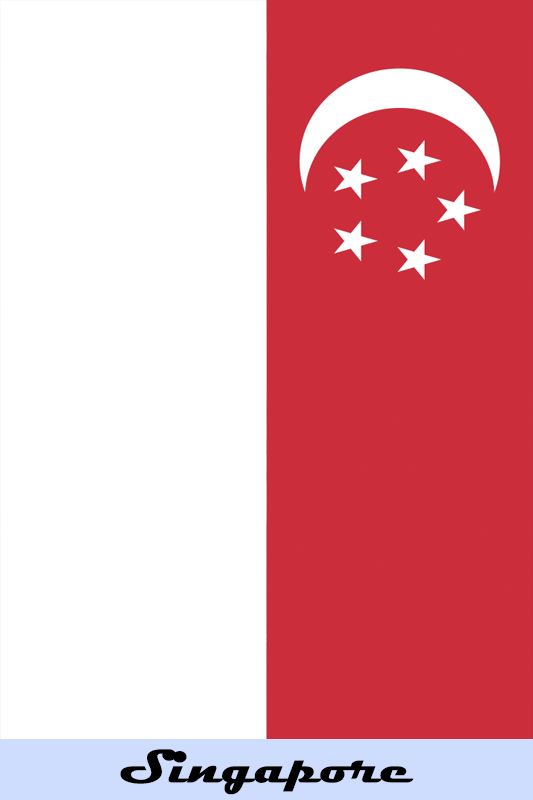
<style>
.page{position:relative;width:533px;height:800px;background:#ffffff}
.page>*{position:absolute;margin:0}
.t1{font:48px "Magneto-Bold";color:#000000;scale:1.08 1}
</style>
<div class="page">
<p class="t1" style="left:120px;top:749px;width:294px;height:46px">Singapore</p>
</div>
